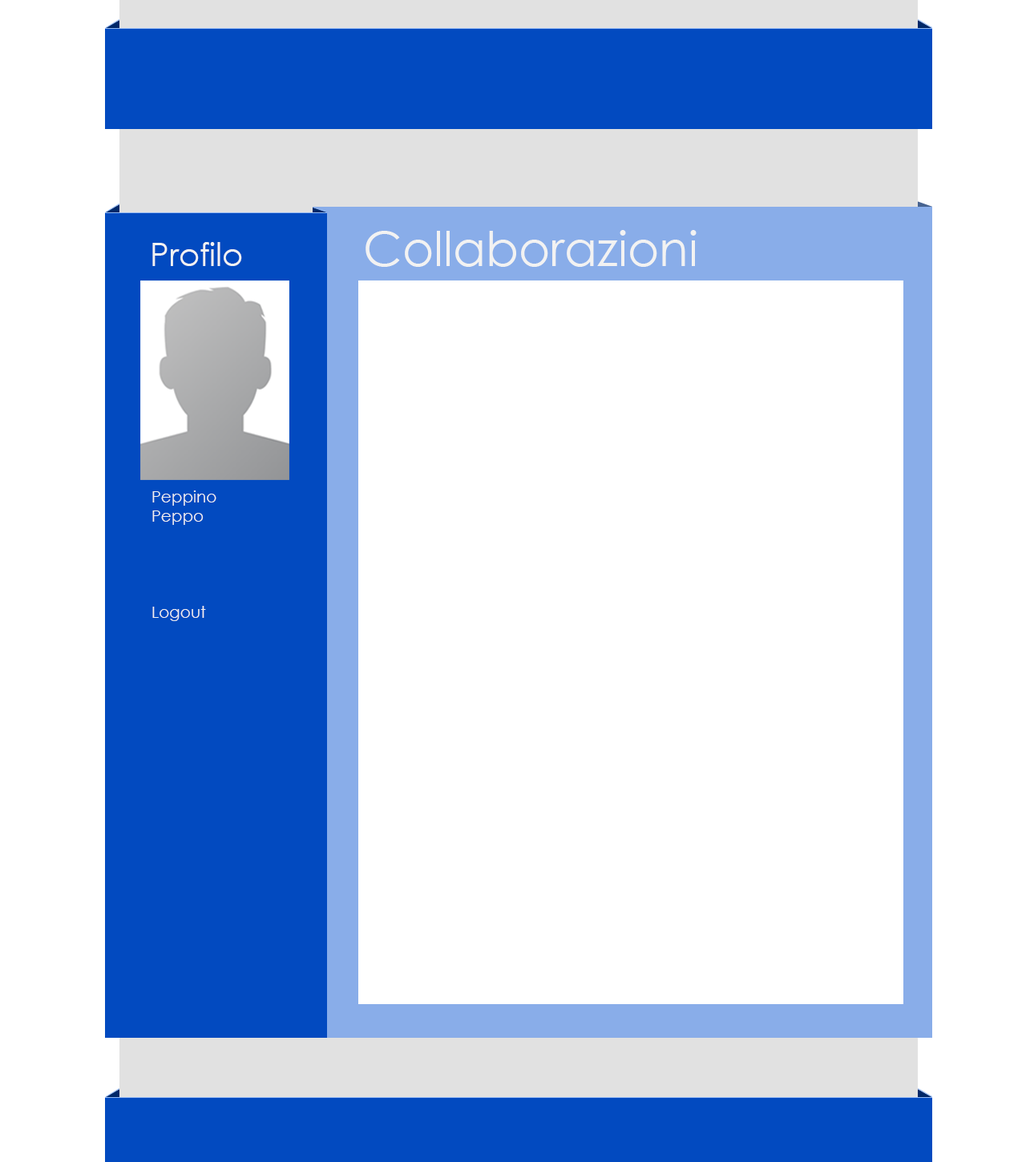
<style>
.page{position:relative;width:1026px;height:1162px;background:#ffffff}
.page>*{position:absolute;margin:0}
.t1{font:48.1px "CenturyGothic";color:#f2f2f2}
.t2{font:32.1px "CenturyGothic";color:#f2f2f2}
.t3{font:16px "CenturyGothic";color:#f2f2f2}
</style>
<div class="page">
<p class="t1" style="left:366px;top:230px;width:331px;height:37px">Collaborazioni</p>
<p class="t2" style="left:152px;top:242px;width:90px;height:24px">Profilo</p>
<p class="t3" style="left:152px;top:491px;width:64px;height:130px">Peppino<br>Peppo<br><br><br><br><br>Logout</p>
</div>
